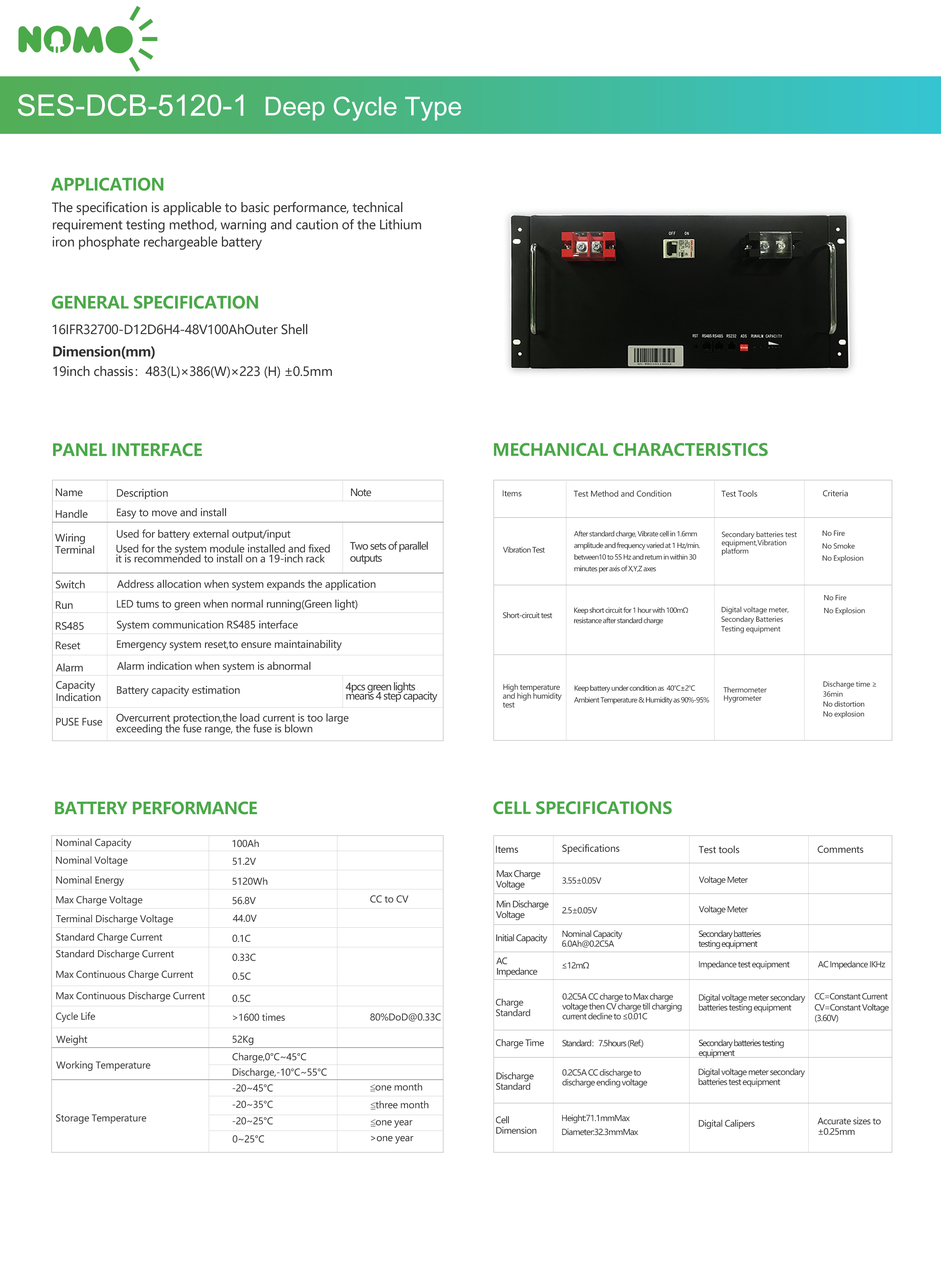
<style>
.page{position:relative;width:941px;height:1267px;background:#ffffff}
.page>*{position:absolute;margin:0}
.t1{font:29.5px "ArialMT";color:#ffffff}
.t2{font:25.8px "ArialMT";color:#ffffff}
.t3{font:16.8px "MicrosoftYaHeiUI-Bold";letter-spacing:-0.025em;color:#4aa948}
.t4{font:12.5px "MicrosoftYaHeiUI";letter-spacing:-0.025em;color:#343434}
.t5{font:12.5px "MicrosoftYaHeiUI";letter-spacing:-0.025em;color:#333333}
.t6{font:13.3px "MicrosoftYaHeiUI-Bold";letter-spacing:-0.025em;color:#333333}
.t7{font:16.8px "MicrosoftYaHeiUI-Bold";letter-spacing:-0.01em;color:#4aa948}
.t8{font:10.1px "MicrosoftYaHeiUI";letter-spacing:-0.025em;color:#343434}
.t9{font:10.1px "MicrosoftYaHeiUI";letter-spacing:-0.075em;color:#343434}
.t10{font:7.8px "MicrosoftYaHeiUI";letter-spacing:-0.025em;color:#343434}
.t11{font:6.9px "MicrosoftYaHeiUI";letter-spacing:-0.075em;color:#343434}
.t12{font:6.9px "MicrosoftYaHeiUI";letter-spacing:-0.025em;color:#343434}
.t13{font:7.4px "MicrosoftYaHeiUI";letter-spacing:-0.075em;color:#343434}
.t14{font:7.4px "MicrosoftYaHeiUI";letter-spacing:-0.05em;color:#343434}
.t15{font:16.6px "MicrosoftYaHeiUI-Bold";letter-spacing:-0.025em;color:#4aa948}
.t16{font:16.6px "MicrosoftYaHeiUI-Bold";letter-spacing:-0.01em;color:#4aa948}
.t17{font:9.3px "MicrosoftYaHeiUI";letter-spacing:-0.025em;color:#343434}
.t18{font:8.8px "MicrosoftYaHeiUI";letter-spacing:-0.075em;color:#343434}
.t19{font:8.2px "MicrosoftYaHeiUI";letter-spacing:-0.075em;color:#343434}
.t20{font:8.2px "MicrosoftYaHeiUI";letter-spacing:-0.1em;color:#343434}
.t21{font:8.8px "MicrosoftYaHeiUI";letter-spacing:-0.05em;color:#343434}
</style>
<div class="page">
<p class="t1" style="left:18px;top:94px;width:225px;height:22px">SES-DCB-5120-1</p>
<p class="t2" style="left:266px;top:96px;width:195px;height:25px">Deep Cycle Type</p>
<p class="t3" style="left:51px;top:177px;width:112px;height:14px">APPLICATION</p>
<p class="t4" style="left:52px;top:202px;width:369px;height:48px">The specification is applicable to basic performance, technical<br>requirement testing method, warning and caution of the Lithium<br>iron phosphate rechargeable battery</p>
<p class="t3" style="left:52px;top:295px;width:206px;height:14px">GENERAL SPECIFICATION</p>
<p class="t4" style="left:53px;top:324px;width:255px;height:10px">16IFR32700-D12D6H4-48V100AhOuter Shell</p>
<p class="t5" style="left:53px;top:346px;width:279px;height:32px"><span class="t6">Dimension(mm) <br></span>19inch chassis：483(L)×386(W)×223 (H) ±0.5mm</p>
<p class="t3" style="left:53px;top:443px;width:149px;height:14px">PANEL INTERFACE</p>
<p class="t7" style="left:494px;top:443px;width:274px;height:13px">MECHANICAL CHARACTERISTICS</p>
<p class="t8" style="left:56px;top:488px;width:27px;height:8px">Name</p>
<p class="t8" style="left:117px;top:489px;width:51px;height:10px">Description</p>
<p class="t9" style="left:351px;top:488px;width:20px;height:8px">Note</p>
<p class="t10" style="left:503px;top:490px;width:18px;height:6px">Items</p>
<p class="t10" style="left:574px;top:490px;width:97px;height:7px">Test Method and Condition</p>
<p class="t10" style="left:721px;top:490px;width:36px;height:7px">Test Tools</p>
<p class="t10" style="left:823px;top:490px;width:25px;height:6px">Criteria</p>
<p class="t8" style="left:56px;top:510px;width:32px;height:8px">Handle</p>
<p class="t8" style="left:117px;top:508px;width:109px;height:11px">Easy to move and install</p>
<p class="t8" style="left:55px;top:534px;width:39px;height:20px">Wiring<br>Terminal</p>
<p class="t8" style="left:117px;top:530px;width:174px;height:10px">Used for battery external output/input</p>
<p class="t11" style="left:574px;top:531px;width:126px;height:42px">After standard charge, Vibrate cell in 1.6mm<br>amplitude and frequency varied at 1 Hz/min. <br>between10 to 55 Hz and return in within 30<br>minutes per axis of X,Y,Z axes</p>
<p class="t12" style="left:722px;top:531px;width:75px;height:24px">Secondary batteries test<br>equipment,Vibration<br>platform</p>
<p class="t12" style="left:823px;top:530px;width:22px;height:6px">No Fire</p>
<p class="t8" style="left:116px;top:544px;width:214px;height:19px">Used for the system module installed and fixed<br>it is recommended to install on a 19-inch rack</p>
<p class="t9" style="left:350px;top:541px;width:78px;height:23px">Two sets of parallel <br>outputs</p>
<p class="t12" style="left:823px;top:543px;width:32px;height:6px">No Smoke</p>
<p class="t13" style="left:503px;top:547px;width:42px;height:6px">Vibration Test</p>
<p class="t12" style="left:823px;top:555px;width:40px;height:8px">No Explosion</p>
<p class="t8" style="left:56px;top:580px;width:29px;height:9px">Switch</p>
<p class="t8" style="left:117px;top:580px;width:258px;height:10px">Address allocation when system expands the application</p>
<p class="t8" style="left:56px;top:601px;width:17px;height:8px">Run</p>
<p class="t8" style="left:117px;top:600px;width:240px;height:10px">LED tums to green when normal running(Green light)</p>
<p class="t12" style="left:824px;top:595px;width:22px;height:5px">No Fire</p>
<p class="t13" style="left:503px;top:612px;width:49px;height:6px">Short-circuit test</p>
<p class="t11" style="left:574px;top:607px;width:114px;height:18px">Keep short circuit for 1 hour with 100mΩ <br>resistance after standard charge</p>
<p class="t12" style="left:721px;top:607px;width:68px;height:26px">Digital voltage meter, <br>Secondary Batteries <br>Testing equipment</p>
<p class="t12" style="left:824px;top:607px;width:41px;height:8px">No Explosion</p>
<p class="t8" style="left:56px;top:622px;width:28px;height:8px">RS485</p>
<p class="t8" style="left:117px;top:620px;width:181px;height:11px">System communication RS485 interface</p>
<p class="t8" style="left:56px;top:642px;width:24px;height:7px">Reset</p>
<p class="t8" style="left:117px;top:640px;width:225px;height:11px">Emergency system reset,to ensure maintainability</p>
<p class="t8" style="left:56px;top:663px;width:27px;height:9px">Alarm</p>
<p class="t8" style="left:117px;top:662px;width:194px;height:11px">Alarm indication when system is abnormal</p>
<p class="t8" style="left:56px;top:681px;width:45px;height:20px">Capacity<br>Indication</p>
<p class="t8" style="left:117px;top:686px;width:123px;height:11px">Battery capacity estimation</p>
<p class="t9" style="left:346px;top:682px;width:91px;height:20px">4pcs green lights<br>means 4 step capacity</p>
<p class="t14" style="left:503px;top:684px;width:59px;height:24px">High temperature<br>and high humidity<br>test</p>
<p class="t11" style="left:574px;top:685px;width:135px;height:19px">Keep battery under condition as  40℃±2℃<br>Ambient Temperature &amp; Humidity as 90%-95%</p>
<p class="t12" style="left:724px;top:687px;width:43px;height:15px">Thermometer <br>Hygrometer</p>
<p class="t12" style="left:823px;top:681px;width:54px;height:37px">Discharge time ≥<br>36min<br>No distortion <br>No explosion</p>
<p class="t8" style="left:116px;top:714px;width:232px;height:21px">Overcurrent protection,the load current is too large <br>exceeding the fuse range, the fuse is blown</p>
<p class="t8" style="left:56px;top:718px;width:46px;height:8px">PUSE Fuse</p>
<p class="t15" style="left:55px;top:801px;width:202px;height:14px">BATTERY PERFORMANCE</p>
<p class="t16" style="left:493px;top:801px;width:179px;height:13px">CELL SPECIFICATIONS</p>
<p class="t17" style="left:56px;top:839px;width:76px;height:10px">Nominal Capacity</p>
<p class="t17" style="left:232px;top:839px;width:27px;height:8px">100Ah</p>
<p class="t17" style="left:496px;top:846px;width:22px;height:7px">Items</p>
<p class="t17" style="left:562px;top:844px;width:58px;height:10px">Specifications</p>
<p class="t17" style="left:699px;top:846px;width:40px;height:7px">Test tools</p>
<p class="t17" style="left:818px;top:846px;width:46px;height:7px">Comments</p>
<p class="t17" style="left:56px;top:856px;width:72px;height:10px">Nominal Voltage</p>
<p class="t17" style="left:233px;top:857px;width:23px;height:8px">51.2V</p>
<p class="t18" style="left:496px;top:870px;width:45px;height:20px">Max Charge <br>Voltage</p>
<p class="t17" style="left:56px;top:876px;width:68px;height:10px">Nominal Energy</p>
<p class="t17" style="left:233px;top:877px;width:34px;height:8px">5120Wh</p>
<p class="t19" style="left:562px;top:877px;width:39px;height:7px">3.55±0.05V</p>
<p class="t19" style="left:699px;top:876px;width:49px;height:9px">Voltage Meter</p>
<p class="t17" style="left:56px;top:896px;width:86px;height:10px">Max Charge Voltage</p>
<p class="t17" style="left:233px;top:897px;width:23px;height:7px">56.8V</p>
<p class="t17" style="left:370px;top:895px;width:39px;height:8px">CC to CV</p>
<p class="t18" style="left:496px;top:900px;width:53px;height:20px">Min Discharge<br>Voltage</p>
<p class="t19" style="left:699px;top:906px;width:49px;height:9px">Voltage Meter</p>
<p class="t17" style="left:56px;top:915px;width:117px;height:10px">Terminal Discharge Voltage</p>
<p class="t17" style="left:233px;top:915px;width:24px;height:7px">44.0V</p>
<p class="t19" style="left:562px;top:907px;width:35px;height:7px">2.5±0.05V</p>
<p class="t17" style="left:56px;top:933px;width:106px;height:10px">Standard Charge Current</p>
<p class="t17" style="left:232px;top:934px;width:18px;height:8px">0.1C</p>
<p class="t18" style="left:496px;top:934px;width:52px;height:10px">Initial Capacity</p>
<p class="t19" style="left:562px;top:930px;width:60px;height:18px">Nominal Capacity <br>6.0Ah@0.2C5A</p>
<p class="t20" style="left:698px;top:930px;width:63px;height:19px">Secondary batteries<br>testing equipment</p>
<p class="t17" style="left:56px;top:950px;width:118px;height:10px">Standard Discharge Current</p>
<p class="t17" style="left:232px;top:954px;width:24px;height:7px">0.33C</p>
<p class="t18" style="left:496px;top:957px;width:41px;height:20px">AC <br>Impedance</p>
<p class="t19" style="left:562px;top:962px;width:27px;height:7px">≤12mΩ</p>
<p class="t19" style="left:699px;top:961px;width:91px;height:8px">Impedance test equipment</p>
<p class="t19" style="left:818px;top:961px;width:67px;height:8px">AC Impedance IKHz</p>
<p class="t17" style="left:56px;top:970px;width:137px;height:11px">Max Continuous Charge Current</p>
<p class="t17" style="left:232px;top:972px;width:19px;height:8px">0.5C</p>
<p class="t17" style="left:56px;top:992px;width:149px;height:10px">Max Continuous Discharge Current</p>
<p class="t17" style="left:232px;top:995px;width:18px;height:7px">0.5C</p>
<p class="t21" style="left:496px;top:999px;width:34px;height:17px">Charge<br>Standard</p>
<p class="t19" style="left:562px;top:993px;width:120px;height:27px">0.2C5A CC charge to Max charge<br>voltage then CV charge till charging <br>current decline to ≤0.01C</p>
<p class="t19" style="left:699px;top:994px;width:106px;height:19px">Digital voltage meter secondary<br>batteries testing equipment</p>
<p class="t19" style="left:815px;top:993px;width:73px;height:7px">CC=Constant Current</p>
<p class="t17" style="left:56px;top:1012px;width:39px;height:10px">Cycle Life</p>
<p class="t17" style="left:233px;top:1013px;width:52px;height:8px">&gt;1600 times</p>
<p class="t17" style="left:370px;top:1013px;width:71px;height:8px">80%DoD@0.33C</p>
<p class="t19" style="left:815px;top:1004px;width:74px;height:9px">CV=Constant Voltage</p>
<p class="t19" style="left:815px;top:1015px;width:23px;height:8px">(3.60V)</p>
<p class="t17" style="left:56px;top:1035px;width:31px;height:10px">Weight</p>
<p class="t17" style="left:233px;top:1035px;width:20px;height:10px">52Kg</p>
<p class="t21" style="left:496px;top:1039px;width:48px;height:9px">Charge Time</p>
<p class="t20" style="left:562px;top:1040px;width:81px;height:8px">Standard：7.5hours (Ref.)</p>
<p class="t20" style="left:699px;top:1040px;width:85px;height:18px">Secondary batteries testing <br>equipment</p>
<p class="t17" style="left:56px;top:1061px;width:94px;height:10px">Working Temperature</p>
<p class="t17" style="left:232px;top:1053px;width:74px;height:10px">Charge,0°C~45°C</p>
<p class="t17" style="left:233px;top:1068px;width:94px;height:10px">Discharge,-10°C~55°C</p>
<p class="t21" style="left:496px;top:1072px;width:38px;height:18px">Discharge<br>Standard</p>
<p class="t19" style="left:562px;top:1069px;width:85px;height:19px">0.2C5A CC discharge to <br>discharge ending voltage</p>
<p class="t19" style="left:698px;top:1068px;width:107px;height:19px">Digital voltage meter secondary<br>batteries test equipment</p>
<p class="t17" style="left:232px;top:1084px;width:41px;height:8px">-20~45°C</p>
<p class="t17" style="left:370px;top:1083px;width:52px;height:9px">≦one month</p>
<p class="t17" style="left:232px;top:1101px;width:41px;height:7px">-20~35°C</p>
<p class="t17" style="left:371px;top:1101px;width:58px;height:9px">≦three month</p>
<p class="t17" style="left:56px;top:1114px;width:90px;height:10px">Storage Temperature</p>
<p class="t17" style="left:232px;top:1117px;width:41px;height:8px">-20~25°C</p>
<p class="t17" style="left:371px;top:1119px;width:42px;height:9px">≦one year</p>
<p class="t21" style="left:496px;top:1116px;width:41px;height:18px">Cell <br>Dimension</p>
<p class="t19" style="left:562px;top:1114px;width:68px;height:9px">Height:71.1mmMax</p>
<p class="t21" style="left:699px;top:1120px;width:56px;height:9px">Digital Calipers</p>
<p class="t21" style="left:818px;top:1117px;width:63px;height:18px">Accurate sizes to<br>±0.25mm</p>
<p class="t19" style="left:562px;top:1128px;width:76px;height:7px">Diameter:32.3mmMax</p>
<p class="t17" style="left:233px;top:1135px;width:31px;height:8px">0~25°C</p>
<p class="t17" style="left:371px;top:1136px;width:42px;height:8px">&gt;one year</p>
</div>
